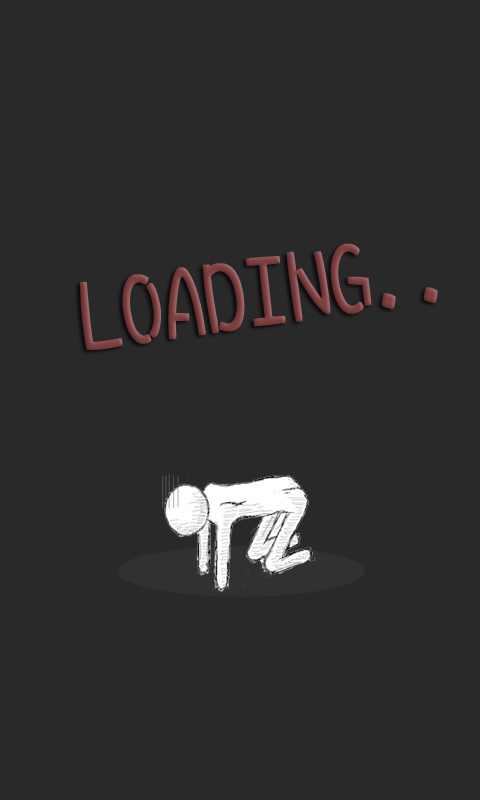
<style>
.page{position:relative;width:480px;height:800px;background:#292929}
.page>*{position:absolute;margin:0}
.t1{font:96px "DFWaWa-Md-HK-BF";font-weight:bold;scale:0.83 1}
</style>
<div class="page">
<p class="t1" style="left:80px;top:243px;width:358px;height:107px;rotate:-8deg">LOADING..</p>
</div>
